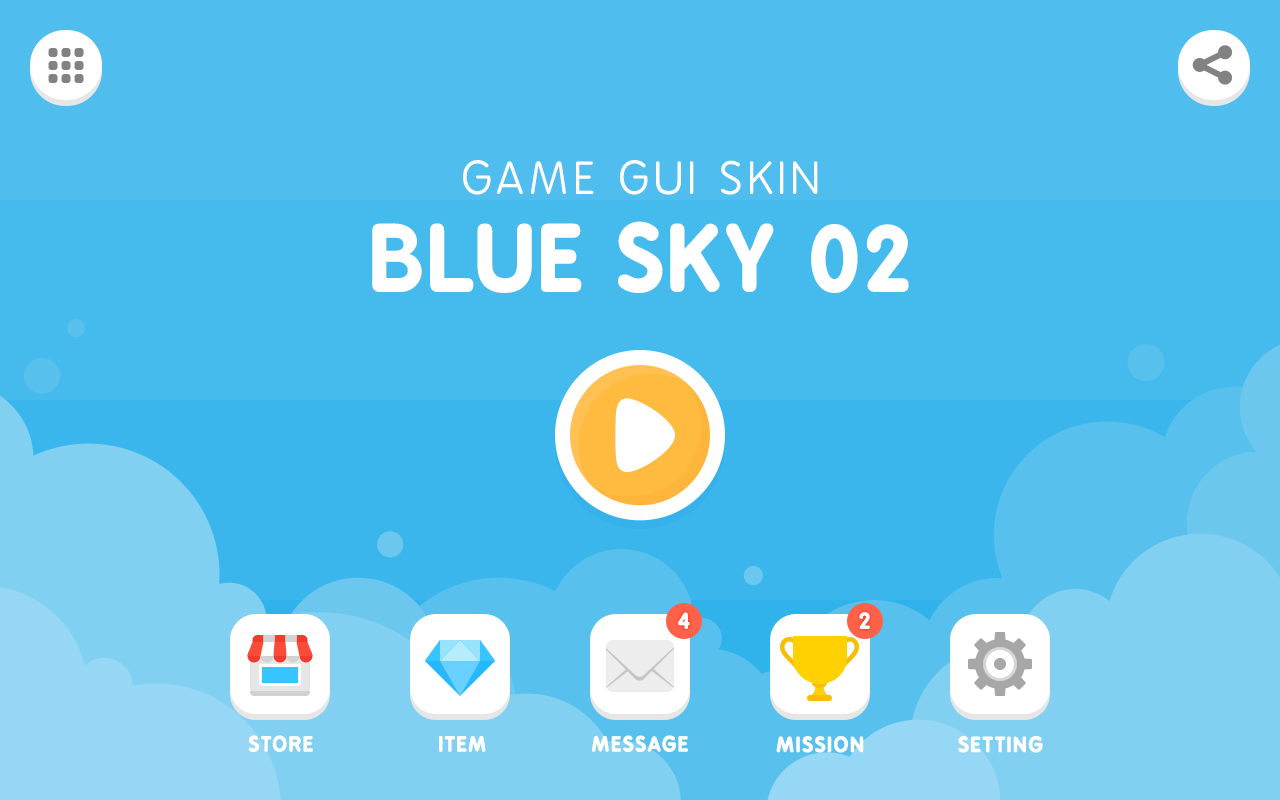
<style>
.page{position:relative;width:1280px;height:800px;background:#4fbdee}
.page>*{position:absolute;margin:0}
.t1{font:44px "BPreplay";letter-spacing:0.1em;color:#ffffff;text-transform:uppercase}
.t2{font:88px "BPreplay-Bold";letter-spacing:0.05em;color:#ffffff;text-transform:uppercase}
.t3{font:22px "BPreplay-Bold";letter-spacing:0.05em;color:#ffffff;text-transform:uppercase}
.t4{font:20px "BPreplay-Bold";letter-spacing:0.07em;color:#ffffff;text-transform:uppercase}
</style>
<div class="page">
<p class="t1" style="left:463px;top:160px;width:355px;height:35px">game gui skin</p>
<p class="t2" style="left:372px;top:221px;width:537px;height:72px">BLUE SKY 02</p>
<p class="t3" style="left:677px;top:612px;width:13px;height:17px">4</p>
<p class="t3" style="left:859px;top:612px;width:11px;height:17px">2</p>
<p class="t4" style="left:248px;top:735px;width:65px;height:17px">store</p>
<p class="t4" style="left:439px;top:736px;width:47px;height:16px">item</p>
<p class="t4" style="left:592px;top:735px;width:96px;height:17px">message</p>
<p class="t4" style="left:776px;top:736px;width:88px;height:17px">mission</p>
<p class="t4" style="left:958px;top:736px;width:85px;height:17px">setting</p>
</div>
